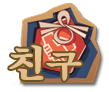
<style>
.page{position:relative;width:109px;height:92px;background:#ffffff}
.page>*{position:absolute;margin:0}
.t1{font:39px "MJemokBatang";letter-spacing:-0.08em;color:#e7c18f;font-weight:bold;scale:1.12 1}
.t2{font:32.9px "MJemokBatang";letter-spacing:-0.08em;color:#e7c18f;font-weight:bold;scale:1.12 1}
</style>
<div class="page">
<p class="t1" style="left:9px;top:45px;width:73px;height:36px">친<span class="t2">구</span></p>
</div>
